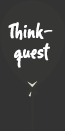
<style>
.page{position:relative;width:65px;height:131px;background:#333333}
.page>*{position:absolute;margin:0}
.t1{font:24.2px/6px "Romy";color:#ffffff;font-weight:bold;scale:0.88 1}
.t2{font:24.2px/20px "Romy";color:#ffffff;font-weight:bold;scale:0.88 1}
</style>
<div class="page">
<p class="t1" style="left:8px;top:22px;width:45px;height:46px;text-align:center">Think-<br><span class="t2">quest</span></p>
</div>
